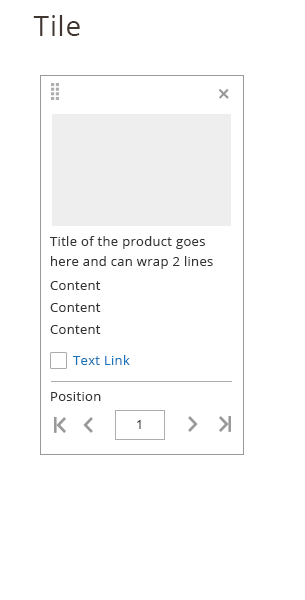
<style>
.page{position:relative;width:305px;height:600px;background:#ffffff}
.page>*{position:absolute;margin:0}
.t1{font:28px "OpenSans";letter-spacing:0.025em;color:#41362f}
.t2{font:25px "OpenSans-Semibold";color:#999999}
.t3{font:13px/56px "OpenSans";letter-spacing:0.025em;color:#333333}
.t4{font:13px/20px "OpenSans";letter-spacing:0.025em;color:#333333}
.t5{font:13px/24px "OpenSans";letter-spacing:0.025em;color:#333333}
.t6{font:13px/22px "OpenSans";letter-spacing:0.025em;color:#333333}
.t7{font:13px "OpenSans";letter-spacing:0.025em;color:#1874ba}
.t8{font:13px "OpenSans";letter-spacing:0.025em;color:#333333}
</style>
<div class="page">
<p class="t1" style="left:33px;top:15px;width:47px;height:21px">Tile</p>
<p class="t2" style="left:218px;top:88px;width:11px;height:11px;rotate:-46deg">+</p>
<p class="t3" style="left:50px;top:236px;width:163px;height:98px">Title of the product goes <br><span class="t4">here and can wrap 2 lines<br></span><span class="t5">Content<br></span><span class="t6">Content<br>Content</span></p>
<p class="t7" style="left:73px;top:355px;width:57px;height:10px">Text Link</p>
<p class="t8" style="left:51px;top:392px;width:50px;height:9px">Position</p>
<p class="t8" style="left:137px;top:420px;width:4px;height:9px">1</p>
</div>
